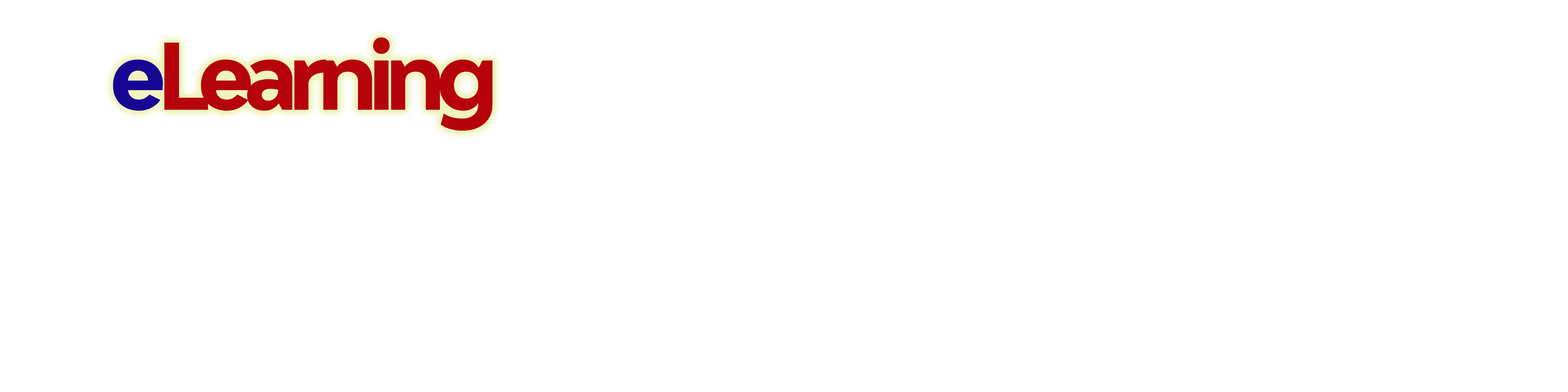
<style>
.page{position:relative;width:1568px;height:392px;background:#ffffff}
.page>*{position:absolute;margin:0}
.t1{font:90.7px "Adlinnaka-BoldDemo";letter-spacing:-0.1em;color:#b6030b}
.t2{font:90.7px "Adlinnaka-BoldDemo";letter-spacing:-0.1em;color:#170694}
</style>
<div class="page">
<p class="t1" style="left:113px;top:37px;width:380px;height:94px"><span class="t2">e</span>Learning</p>
</div>
